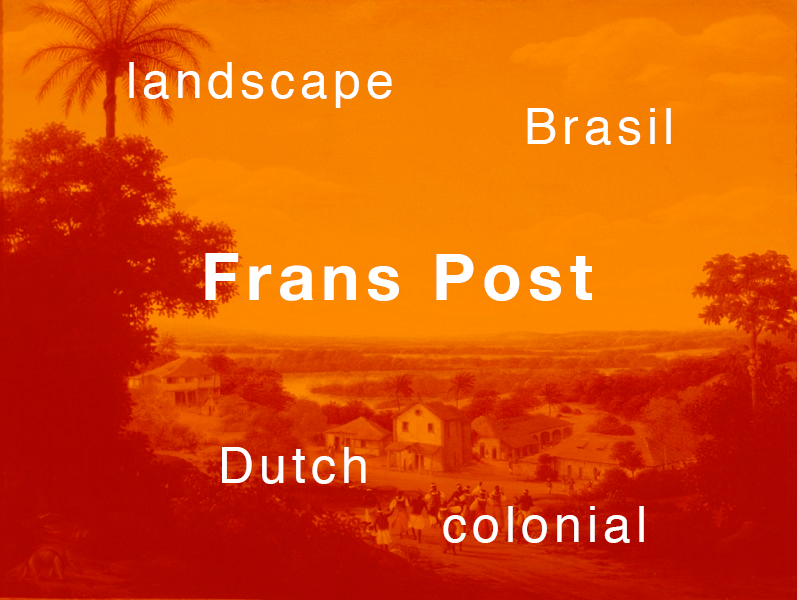
<style>
.page{position:relative;width:797px;height:600px}
.page>*{position:absolute;margin:0}
.t1{font:50px "Helvetica";letter-spacing:0.1em;color:#ffffff}
.t2{font:65px "HelveticaNeue-Bold";letter-spacing:0.1em;color:#ffffff}
</style>
<div class="page">
<p class="t1" style="left:129px;top:62px;width:263px;height:46px">landscape</p>
<p class="t1" style="left:527px;top:108px;width:144px;height:37px">Brasil</p>
<p class="t2" style="left:205px;top:253px;width:387px;height:48px">Frans Post</p>
<p class="t1" style="left:222px;top:447px;width:144px;height:37px">Dutch</p>
<p class="t1" style="left:443px;top:506px;width:201px;height:37px">colonial</p>
</div>
